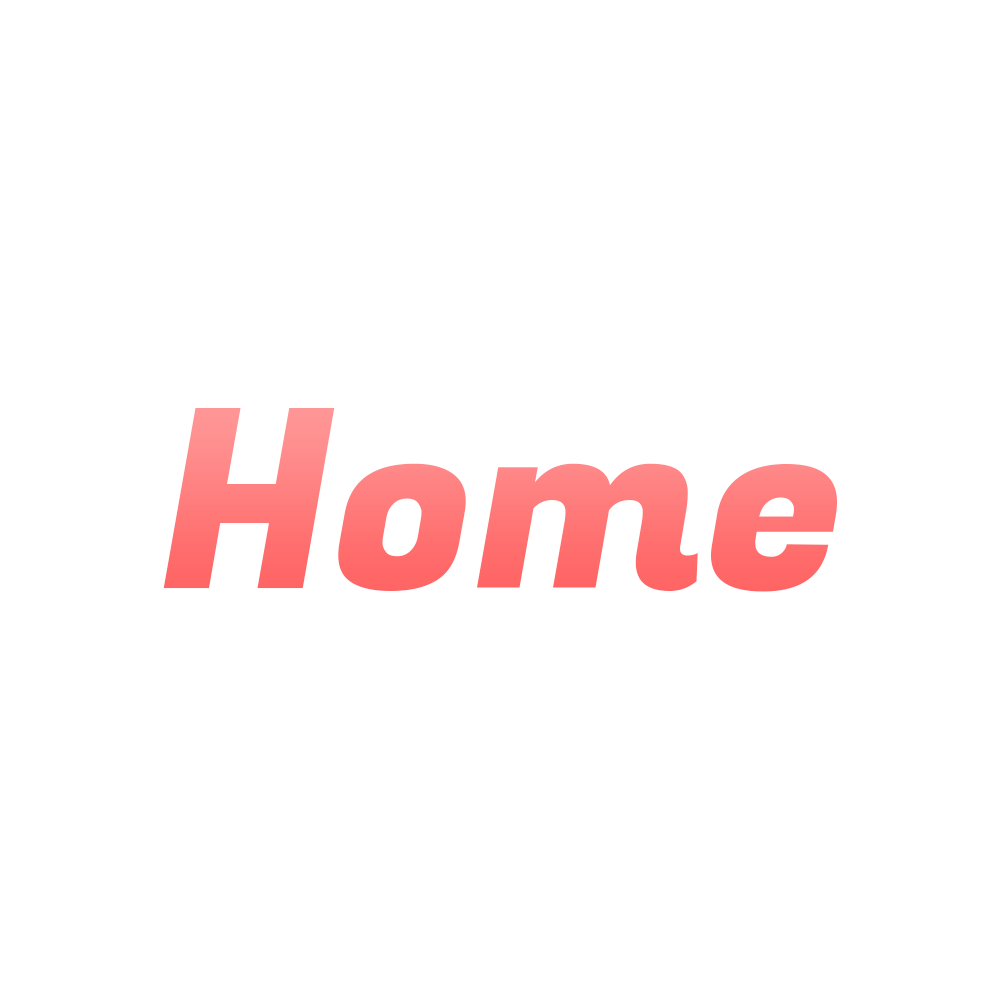
<style>
.page{position:relative;width:1000px;height:1000px;background:#ffffff}
.page>*{position:absolute;margin:0}
.t1{font:250px "FugazOne-Regular";color:#ff7878}
</style>
<div class="page">
<p class="t1" style="left:163px;top:408px;width:674px;height:184px">Home</p>
</div>
